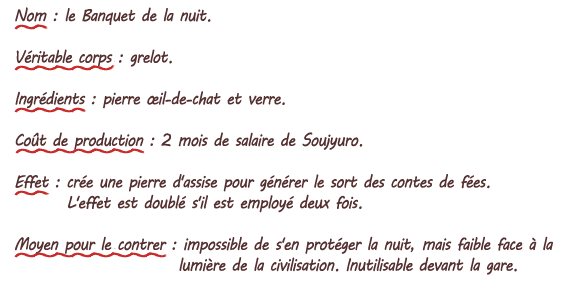
<style>
.page{position:relative;width:578px;height:285px;background:#ffffff}
.page>*{position:absolute;margin:0}
.t1{font:17.3px "MVBoli";letter-spacing:-0.05em;color:#553030;scale:0.9 1}
</style>
<div class="page">
<p class="t1" style="left:15px;top:7px;width:538px;height:268px">Nom : le Banquet de la nuit.<br><br>Véritable corps : grelot.<br><br>Ingrédients : pierre œil-de-chat et verre.<br><br>Coût de production : 2 mois de salaire de Soujyuro.<br><br>Effet : crée une pierre d'assise pour générer le sort des contes de fées.<br>    L'effet est doublé s'il est employé deux fois.<br><br>Moyen pour le contrer : impossible de s'en protéger la nuit, mais faible face à la<br>                        lumière de la civilisation. Inutilisable devant la gare.</p>
</div>
